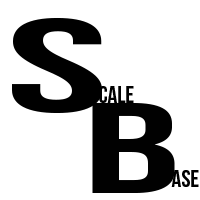
<style>
.page{position:relative;width:200px;height:200px;background:#ffffff}
.page>*{position:absolute;margin:0}
.t1{font:132.2px "BebasNeue";color:#000000;scale:2.06 1}
.t2{font:24px "BebasNeue";color:#000000}
.t3{font:129.3px "BebasNeue";color:#010101;scale:1.87 1}
</style>
<div class="page">
<p class="t1" style="left:12px;top:17px;width:90px;height:96px">s</p>
<p class="t2" style="left:99px;top:86px;width:35px;height:17px">cale</p>
<p class="t3" style="left:92px;top:102px;width:83px;height:91px">b</p>
<p class="t2" style="left:171px;top:170px;width:28px;height:17px">ase</p>
</div>
